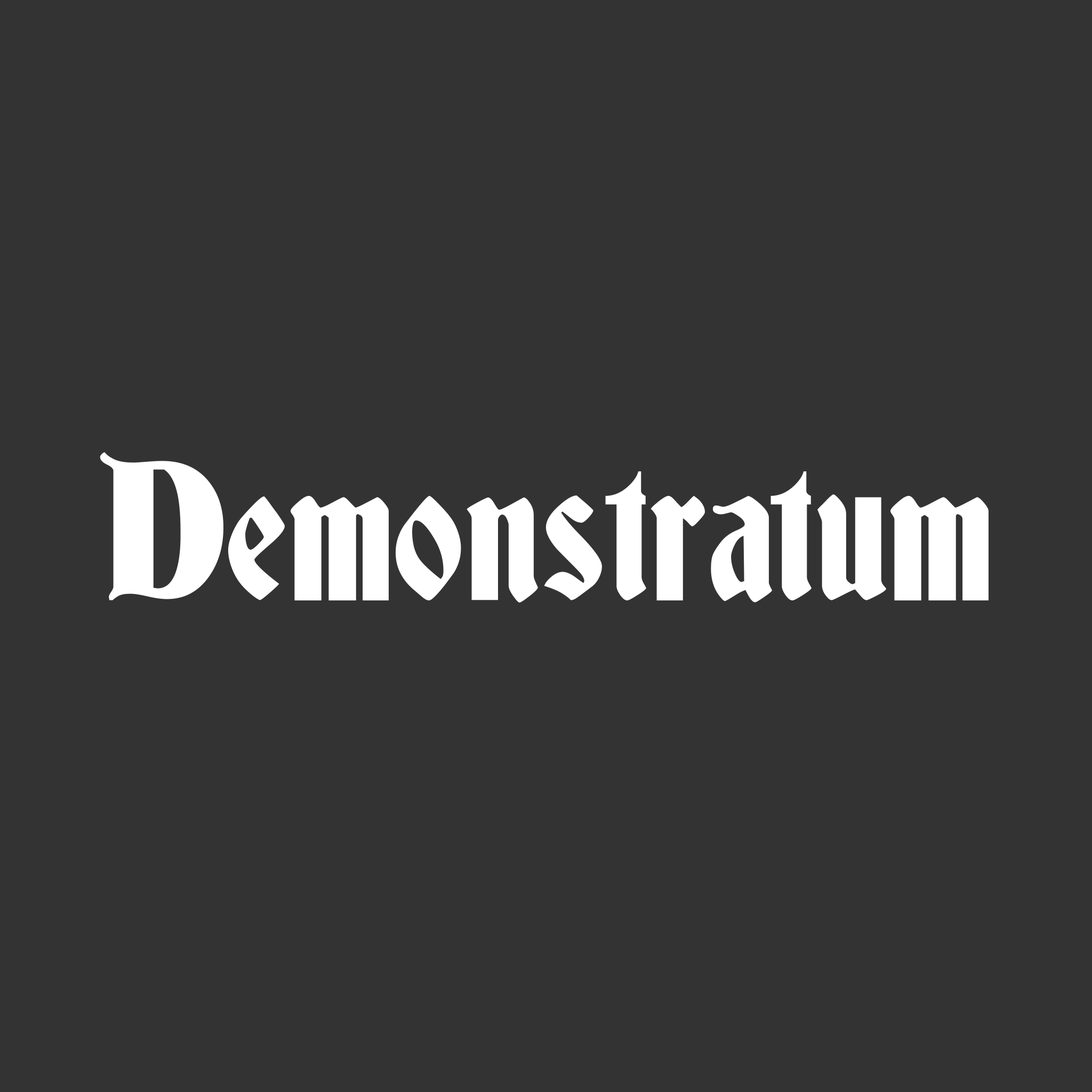
<style>
.page{position:relative;width:1092px;height:1092px;background:#333333}
.page>*{position:absolute;margin:0}
.t1{font:178.3px "Deutsch-Gothic";color:#ffffff}
</style>
<div class="page">
<p class="t1" style="left:100px;top:452px;width:889px;height:151px">Demonstratum</p>
</div>
